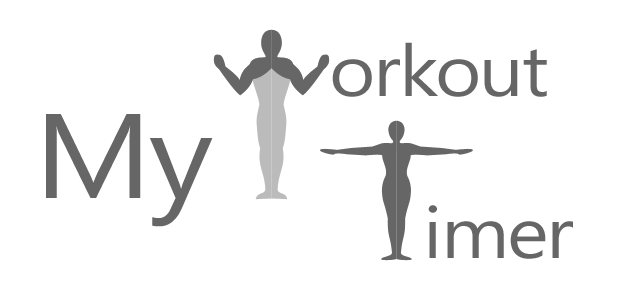
<style>
.page{position:relative;width:620px;height:300px;background:#ffffff}
.page>*{position:absolute;margin:0}
.t1{font:72px "SegoeUI";letter-spacing:-0.025em;color:#666666;scale:1.1 1}
.t2{font:120px "SegoeUI";letter-spacing:-0.025em;color:#666666;scale:1.1 1}
</style>
<div class="page">
<p class="t1" style="left:332px;top:42px;width:215px;height:55px">orkout</p>
<p class="t2" style="left:46px;top:114px;width:167px;height:113px">My</p>
<p class="t1" style="left:428px;top:205px;width:145px;height:54px">imer</p>
</div>
